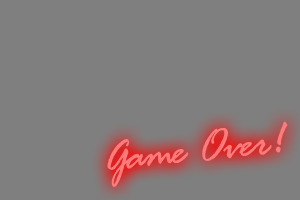
<style>
.page{position:relative;width:300px;height:200px;background:#7f7f7f}
.page>*{position:absolute;margin:0}
.t1{font:48px "RageItalicLetPlain";color:#ff7a7a}
</style>
<div class="page">
<p class="t1" style="left:107px;top:121px;width:181px;height:66px;rotate:-6deg">Game Over!</p>
</div>
